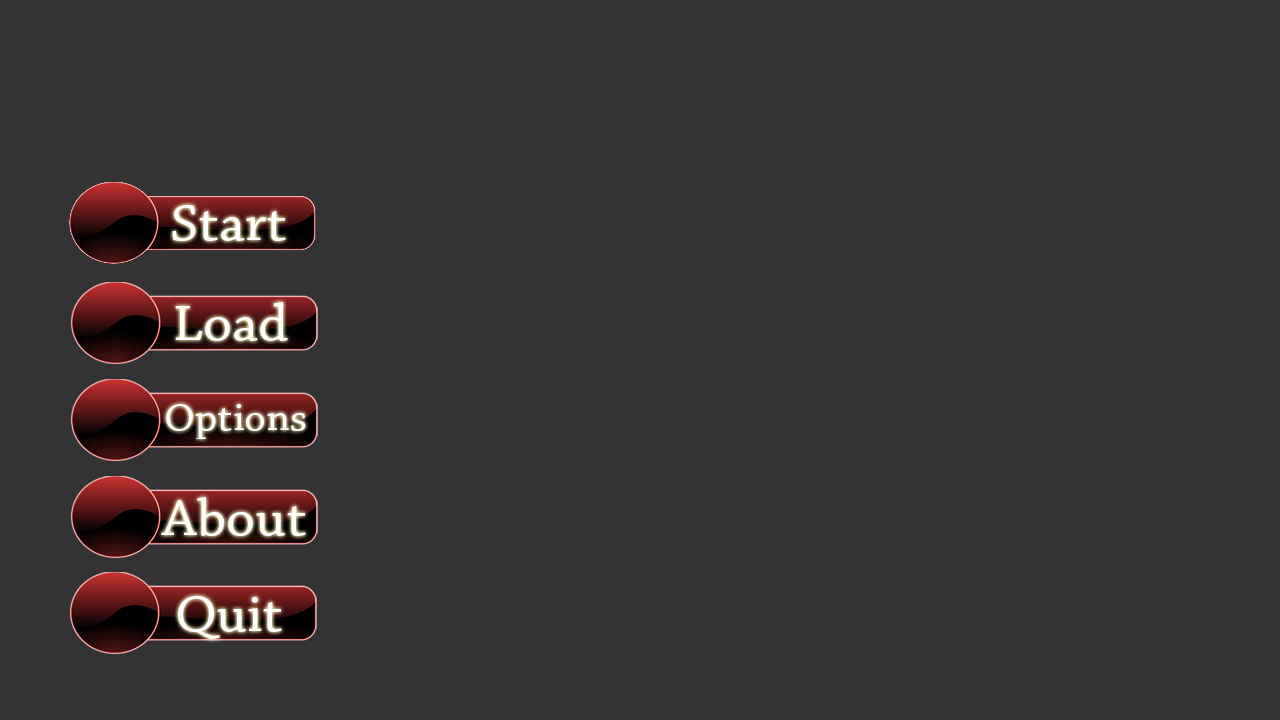
<style>
.page{position:relative;width:1280px;height:720px;background:#333333}
.page>*{position:absolute;margin:0}
.t1{font:53.5px "ChaparralPro-Regular";color:#ffffff;scale:1.08 1}
.t2{font:40px "ChaparralPro-Regular";color:#ffffff;scale:1.08 1}
</style>
<div class="page">
<p class="t1" style="left:172px;top:205px;width:114px;height:36px">Start</p>
<p class="t1" style="left:175px;top:302px;width:113px;height:39px">Load</p>
<p class="t2" style="left:166px;top:404px;width:140px;height:35px">Options</p>
<p class="t1" style="left:161px;top:497px;width:145px;height:39px">About</p>
<p class="t1" style="left:178px;top:596px;width:104px;height:43px">Quit</p>
</div>
